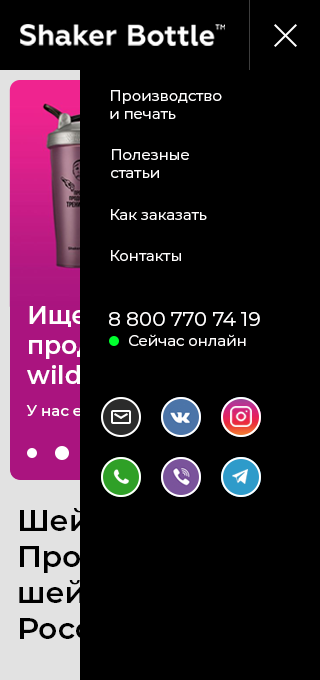
<style>
.page{position:relative;width:320px;height:680px;background:#000000}
.page>*{position:absolute;margin:0}
.t1{font:15px "Montserrat-Regular";color:#fffefe}
.t2{font:25px "Montserrat-SemiBold"}
.t3{font:20px "Montserrat-Regular";color:#fffefe}
.t4{font:15px "Montserrat-Medium";color:#ffffff}
</style>
<div class="page">
<p class="t1" style="left:110px;top:90px;width:112px;height:29px">Производство<br>и печать</p>
<p class="t1" style="left:111px;top:149px;width:78px;height:29px">Полезные<br>статьи</p>
<p class="t1" style="left:111px;top:209px;width:96px;height:11px">Как заказать</p>
<p class="t1" style="left:111px;top:250px;width:70px;height:11px">Контакты</p>
<p class="t2" style="left:27px;top:306px;width:224px;height:78px">Ищете товар для <br>продаж на <br>wildberries?</p>
<p class="t3" style="left:109px;top:312px;width:151px;height:14px">8 800 770 74 19</p>
<p class="t1" style="left:129px;top:334px;width:117px;height:12px">Сейчас онлайн</p>
<p class="t4" style="left:26px;top:405px;width:81px;height:11px">У нас есть</p>
</div>
